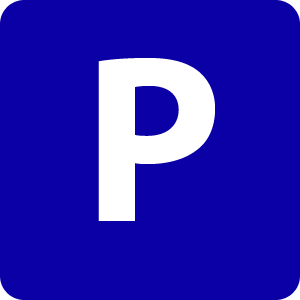
<style>
.page{position:relative;width:300px;height:300px;background:#0b00a5}
.page>*{position:absolute;margin:0}
.t1{font:240px "MyriadPro-Bold";color:#ffffff}
</style>
<div class="page">
<p class="t1" style="left:98px;top:58px;width:117px;height:163px">P</p>
</div>
